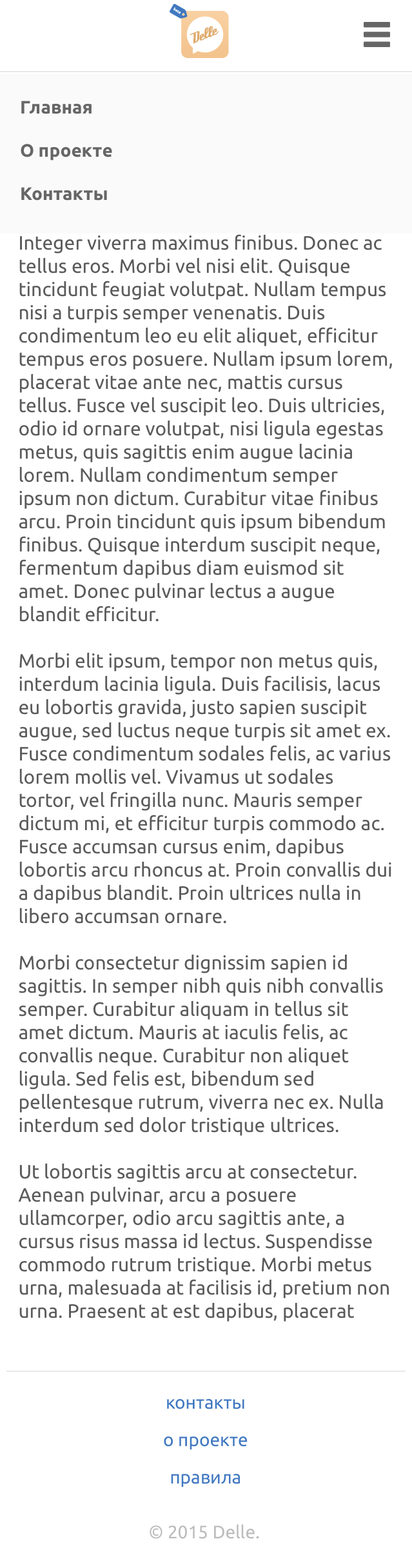
<style>
.page{position:relative;width:412px;height:1568px;background:#ffffff}
.page>*{position:absolute;margin:0}
.t1{font:3.6px "Ubuntu-Bold"}
.t2{font:15.4px "DeftoneStylus";color:#dfaa6d}
.t3{font:18.1px "Ubuntu-Bold";color:#666666}
.t4{font:19.4px "Ubuntu";color:#5a5a5a}
.t5{font:18px/37.4px "Ubuntu";color:#4078c0}
.t6{font:18px "Ubuntu";color:#bcbcbc}
</style>
<div class="page">
<p class="t1" style="left:174px;top:7px;width:7px;height:7px;rotate:29deg">beta</p>
<p class="t2" style="left:190px;top:26px;width:29px;height:18px;rotate:-22deg">Delle</p>
<p class="t3" style="left:21px;top:101px;width:91px;height:100px">Главная<br><br>О проекте<br><br>Контакты</p>
<p class="t4" style="left:18px;top:188px;width:374px;height:1134px">Lorem ipsum dolor sit amet, consectetur adipiscing elit. Nullam quis ipsum arcu. Integer viverra maximus finibus. Donec ac tellus eros. Morbi vel nisi elit. Quisque tincidunt feugiat volutpat. Nullam tempus nisi a turpis semper venenatis. Duis condimentum leo eu elit aliquet, efficitur tempus eros posuere. Nullam ipsum lorem, placerat vitae ante nec, mattis cursus tellus. Fusce vel suscipit leo. Duis ultricies, odio id ornare volutpat, nisi ligula egestas metus, quis sagittis enim augue lacinia lorem. Nullam condimentum semper ipsum non dictum. Curabitur vitae finibus arcu. Proin tincidunt quis ipsum bibendum finibus. Quisque interdum suscipit neque, fermentum dapibus diam euismod sit amet. Donec pulvinar lectus a augue blandit efficitur.<br><br>Morbi elit ipsum, tempor non metus quis, interdum lacinia ligula. Duis facilisis, lacus eu lobortis gravida, justo sapien suscipit augue, sed luctus neque turpis sit amet ex. Fusce condimentum sodales felis, ac varius lorem mollis vel. Vivamus ut sodales tortor, vel fringilla nunc. Mauris semper dictum mi, et efficitur turpis commodo ac. Fusce accumsan cursus enim, dapibus lobortis arcu rhoncus at. Proin convallis dui a dapibus blandit. Proin ultrices nulla in libero accumsan ornare.<br><br>Morbi consectetur dignissim sapien id sagittis. In semper nibh quis nibh convallis semper. Curabitur aliquam in tellus sit amet dictum. Mauris at iaculis felis, ac convallis neque. Curabitur non aliquet ligula. Sed felis est, bibendum sed pellentesque rutrum, viverra nec ex. Nulla interdum sed dolor tristique ultrices.<br><br>Ut lobortis sagittis arcu at consectetur. Aenean pulvinar, arcu a posuere ullamcorper, odio arcu sagittis ante, a cursus risus massa id lectus. Suspendisse commodo rutrum tristique. Morbi metus urna, malesuada at facilisis id, pretium non urna. Praesent at est dapibus, placerat nulla id, congue risus. Ut quis metus non dui sodales tristique. Pellentesque varius neque felis, eget pretium orci porttitor sed. Sed lobortis hendrerit orci id porta. Proin et dolor pulvinar, congue felis fermentum, ultricies eros. Ut vel metus nec justo hendrerit sodales. Nullam dapibus, nisi eu mollis faucibus, elit odio porttitor erat, sed rhoncus ligula ipsum et ipsum. In hac habitasse platea dictumst.</p>
<p class="t5" style="left:164px;top:1399px;width:84px;height:88px;text-align:center">контакты<br>о проекте<br>правила</p>
<p class="t6" style="left:150px;top:1524px;width:109px;height:15px">© 2015 Delle.</p>
</div>
